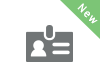
<style>
.page{position:relative;width:100px;height:79px;background:#ffffff}
.page>*{position:absolute;margin:0}
.t1{font:11px "SourceSansPro-Light";letter-spacing:0.12em;color:#ffffff;font-weight:bold}
</style>
<div class="page">
<p class="t1" style="left:77px;top:3px;width:21px;height:21px;rotate:45deg">New</p>
</div>
